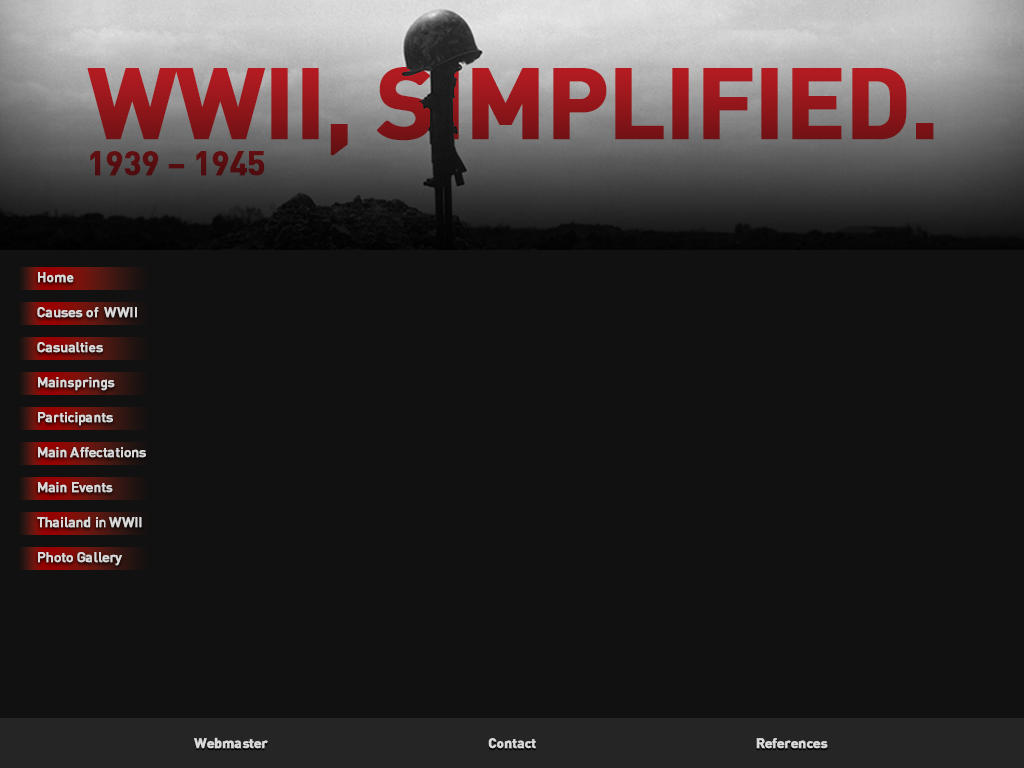
<style>
.page{position:relative;width:1024px;height:768px;background:#111111}
.page>*{position:absolute;margin:0}
.t1{font:99px/37px "DINPro-Bold";letter-spacing:-0.025em;font-weight:bold}
.t2{font:33px/37px "DINPro-Bold";letter-spacing:-0.025em;font-weight:bold}
.t3{font:14px "DINPro-Medium";letter-spacing:-0.025em;color:#d9d9d9;font-weight:bold}
.t4{font:14px "DINPro-Bold";letter-spacing:-0.025em;color:#d9d9d9;font-weight:bold}
</style>
<div class="page">
<p class="t1" style="left:87px;top:67px;width:847px;height:109px">WWII, SIMPLIFIED.<br><span class="t2">1939 – 1945</span></p>
<p class="t3" style="left:38px;top:272px;width:36px;height:11px">Home</p>
<p class="t3" style="left:37px;top:307px;width:100px;height:11px">Causes of  WWII</p>
<p class="t3" style="left:37px;top:342px;width:66px;height:11px">Casualties</p>
<p class="t3" style="left:38px;top:377px;width:77px;height:14px">Mainsprings</p>
<p class="t3" style="left:38px;top:412px;width:75px;height:14px">Participants</p>
<p class="t3" style="left:38px;top:447px;width:108px;height:11px">Main Affectations</p>
<p class="t3" style="left:38px;top:482px;width:75px;height:11px">Main Events</p>
<p class="t3" style="left:37px;top:516px;width:105px;height:12px">Thailand in WWII</p>
<p class="t3" style="left:38px;top:552px;width:84px;height:14px">Photo Gallery</p>
<p class="t4" style="left:194px;top:737px;width:74px;height:12px">Webmaster</p>
<p class="t4" style="left:488px;top:738px;width:48px;height:11px">Contact</p>
<p class="t4" style="left:756px;top:738px;width:72px;height:11px">References</p>
</div>
